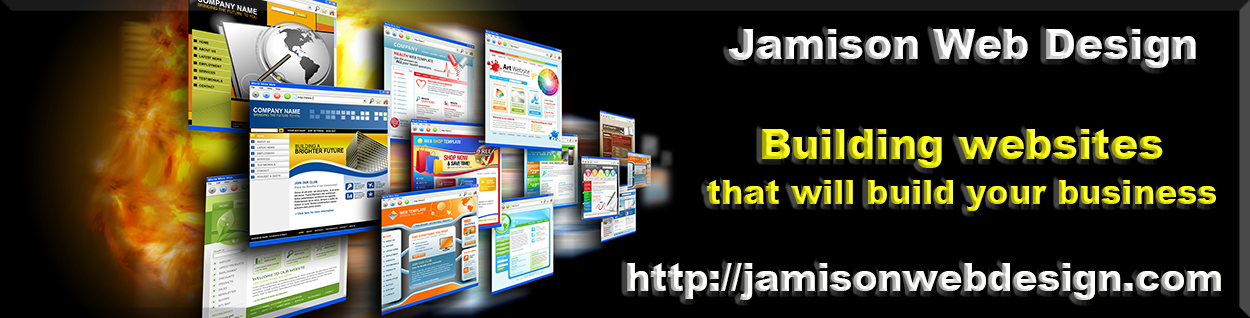
<style>
.page{position:relative;width:1250px;height:318px;background:#000000}
.page>*{position:absolute;margin:0}
.t1{font:41.7px "Arial-Black"}
.t2{font:33.3px "Arial-Black"}
.t3{font:37.5px "Arial-Black"}
</style>
<div class="page">
<p class="t1" style="left:728px;top:29px;width:468px;height:39px">Jamison Web Design</p>
<p class="t1" style="left:762px;top:129px;width:401px;height:39px">Building websites</p>
<p class="t2" style="left:706px;top:180px;width:510px;height:31px">that will build your business</p>
<p class="t3" style="left:627px;top:263px;width:594px;height:37px">http://jamisonwebdesign.com</p>
</div>
